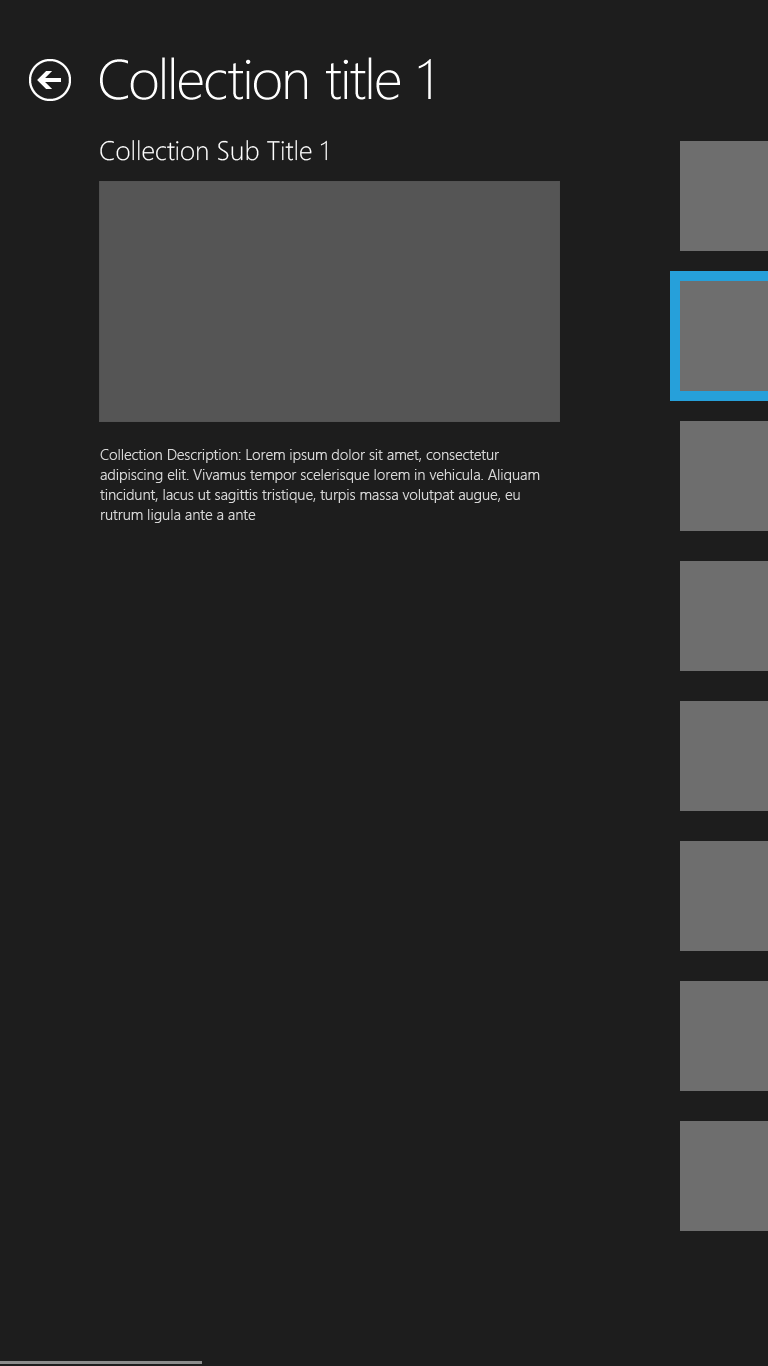
<style>
.page{position:relative;width:768px;height:1366px;background:#1d1d1d}
.page>*{position:absolute;margin:0}
.t1{font:56px "SegoeUI-Light";letter-spacing:-0.01em;color:#ffffff}
.t2{font:26.7px "SegoeUI-Light";color:#ffffff}
.t3{font:14.7px/20px "SegoeUI-Semilight";color:#d6d6d6}
</style>
<div class="page">
<p class="t1" style="left:100px;top:57px;width:331px;height:43px">Collection title 1</p>
<p class="t2" style="left:100px;top:140px;width:227px;height:21px">Collection Sub Title 1</p>
<p class="t3" style="left:100px;top:449px;width:440px;height:74px">Collection Description: Lorem ipsum dolor sit amet, consectetur adipiscing elit. Vivamus tempor scelerisque lorem in vehicula. Aliquam tincidunt, lacus ut sagittis tristique, turpis massa volutpat augue, eu rutrum ligula ante a ante</p>
</div>
